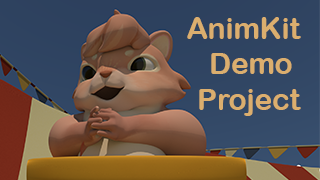
<style>
.page{position:relative;width:320px;height:180px}
.page>*{position:absolute;margin:0}
.t1{font:29.5px "ArialRoundedMTBold";color:#dbae6e}
</style>
<div class="page">
<p class="t1" style="left:187px;top:17px;width:114px;height:99px;text-align:right">AnimKit<br>Demo <br>Project</p>
</div>
